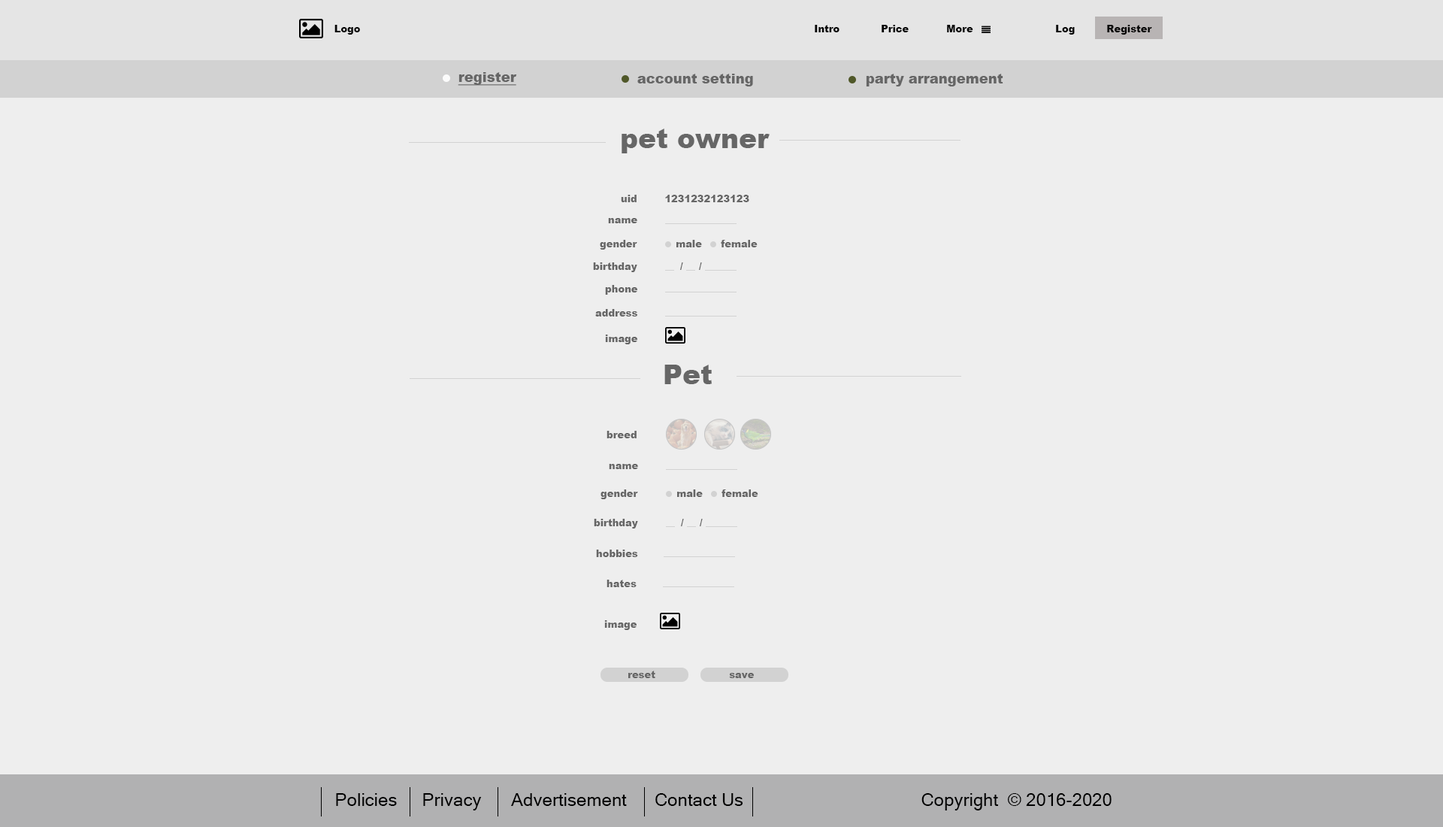
<style>
.page{position:relative;width:1443px;height:827px;background:#eeeeee}
.page>*{position:absolute;margin:0}
.t1{font:9.8px "Arial-Black";color:#050505}
.t2{font:13.5px "Arial-Black";color:#666666;text-decoration:underline}
.t3{font:13.5px "Arial-Black";color:#666666}
.t4{font:27.1px "Arial-Black";color:#666666}
.t5{font:9.8px "Arial-Black";color:#666666}
.t6{font:18px "MicrosoftSansSerif";color:#000000}
</style>
<div class="page">
<p class="t1" style="left:334px;top:25px;width:26px;height:10px">Logo</p>
<p class="t1" style="left:815px;top:25px;width:24px;height:7px">Intro</p>
<p class="t1" style="left:881px;top:25px;width:27px;height:7px">Price</p>
<p class="t1" style="left:947px;top:25px;width:26px;height:7px">More</p>
<p class="t1" style="left:1056px;top:25px;width:18px;height:10px">Log</p>
<p class="t1" style="left:1107px;top:25px;width:45px;height:10px">Register</p>
<p class="t2" style="left:458px;top:72px;width:59px;height:14px">register</p>
<p class="t3" style="left:637px;top:74px;width:116px;height:12px">account setting</p>
<p class="t3" style="left:866px;top:74px;width:137px;height:12px">party arrangement</p>
<p class="t4" style="left:621px;top:128px;width:148px;height:25px">pet owner</p>
<p class="t5" style="left:621px;top:195px;width:15px;height:7px">uid</p>
<p class="t5" style="left:665px;top:195px;width:84px;height:7px">1231232123123</p>
<p class="t5" style="left:608px;top:218px;width:29px;height:5px">name</p>
<p class="t5" style="left:600px;top:240px;width:37px;height:9px">gender</p>
<p class="t5" style="left:676px;top:240px;width:26px;height:7px">male</p>
<p class="t5" style="left:721px;top:240px;width:36px;height:7px">female</p>
<p class="t5" style="left:593px;top:262px;width:44px;height:10px">birthday</p>
<p class="t5" style="left:680px;top:262px;width:3px;height:8px">/</p>
<p class="t5" style="left:699px;top:262px;width:3px;height:8px">/</p>
<p class="t5" style="left:605px;top:285px;width:32px;height:10px">phone</p>
<p class="t5" style="left:595px;top:309px;width:42px;height:7px">address</p>
<p class="t5" style="left:605px;top:334px;width:32px;height:10px">image</p>
<p class="t4" style="left:664px;top:364px;width:48px;height:20px">Pet</p>
<p class="t5" style="left:606px;top:431px;width:30px;height:7px">breed</p>
<p class="t5" style="left:609px;top:464px;width:29px;height:5px">name</p>
<p class="t5" style="left:600px;top:489px;width:38px;height:10px">gender</p>
<p class="t5" style="left:677px;top:489px;width:26px;height:8px">male</p>
<p class="t5" style="left:721px;top:489px;width:37px;height:8px">female</p>
<p class="t5" style="left:594px;top:518px;width:44px;height:10px">birthday</p>
<p class="t5" style="left:681px;top:518px;width:3px;height:8px">/</p>
<p class="t5" style="left:700px;top:518px;width:3px;height:8px">/</p>
<p class="t5" style="left:596px;top:549px;width:42px;height:8px">hobbies</p>
<p class="t5" style="left:606px;top:579px;width:30px;height:8px">hates</p>
<p class="t5" style="left:604px;top:620px;width:32px;height:10px">image</p>
<p class="t5" style="left:628px;top:670px;width:27px;height:8px">reset</p>
<p class="t5" style="left:729px;top:673px;width:25px;height:5px">save</p>
<p class="t6" style="left:336px;top:793px;width:61px;height:12px">Policies</p>
<p class="t6" style="left:423px;top:793px;width:59px;height:17px">Privacy</p>
<p class="t6" style="left:511px;top:793px;width:116px;height:12px">Advertisement</p>
<p class="t6" style="left:655px;top:793px;width:88px;height:12px">Contact Us</p>
<p class="t6" style="left:921px;top:793px;width:190px;height:17px">Copyright  © 2016-2020</p>
</div>
